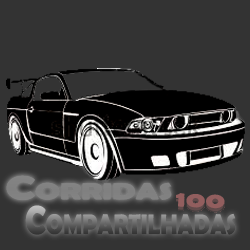
<style>
.page{position:relative;width:250px;height:250px;background:#333333}
.page>*{position:absolute;margin:0}
.t1{font:56.8px "BerlinSansFBDemi-Bold";color:#828282;font-variant:small-caps;scale:1.43 1}
.t2{font:36.9px "BerlinSansFBDemi-Bold";color:#925e5e;font-variant:small-caps;scale:1.45 1}
.t3{font:69.4px "BerlinSansFBDemi-Bold";font-variant:small-caps;scale:0.82 1}
</style>
<div class="page">
<p class="t1" style="left:6px;top:175px;width:166px;height:25px">Corridas</p>
<p class="t2" style="left:176px;top:193px;width:49px;height:16px;rotate:2deg">100</p>
<p class="t3" style="left:25px;top:205px;width:211px;height:30px">Compartilhadas</p>
</div>
